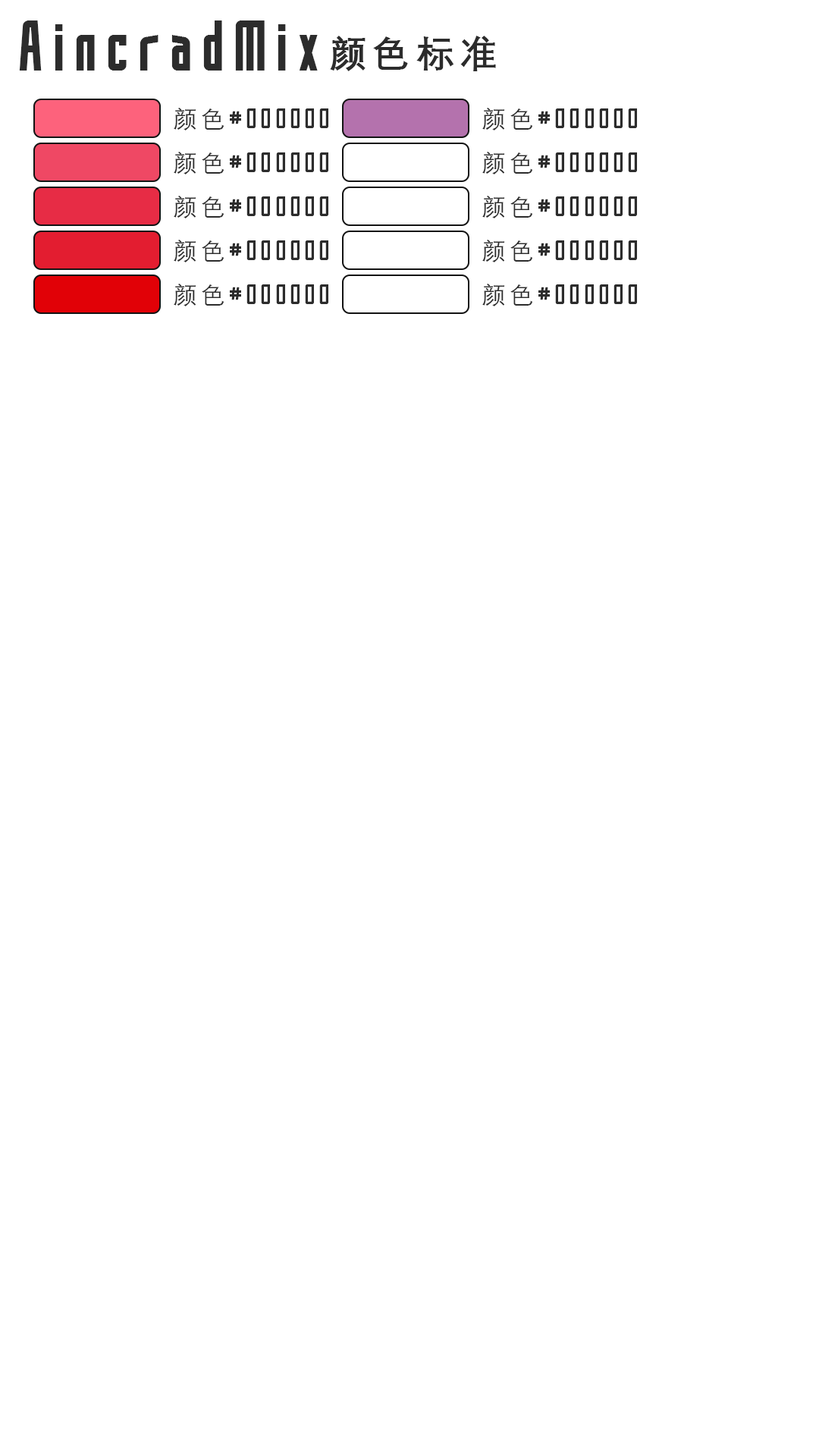
<style>
.page{position:relative;width:819px;height:1456px;background:#ffffff}
.page>*{position:absolute;margin:0}
.t1{font:63.2px "SAOUITT-Bold";letter-spacing:0.15em;color:#2c2c2c}
.t2{font:37.9px "DengXian-Bold";letter-spacing:0.15em;color:#2c2c2c}
.t3{font:24.4px "SAOUI-Regular";letter-spacing:0.15em;color:#2c2c2c}
.t4{font:24.4px "DengXian";letter-spacing:0.15em;color:#2c2c2c}
</style>
<div class="page">
<p class="t1" style="left:19px;top:20px;width:477px;height:51px">AincradMix<span class="t2">颜色标准</span></p>
<p class="t3" style="left:174px;top:108px;width:154px;height:22px"><span class="t4">颜色</span>#000000</p>
<p class="t3" style="left:482px;top:108px;width:155px;height:22px"><span class="t4">颜色</span>#000000</p>
<p class="t3" style="left:174px;top:152px;width:154px;height:22px"><span class="t4">颜色</span>#000000</p>
<p class="t3" style="left:482px;top:152px;width:155px;height:22px"><span class="t4">颜色</span>#000000</p>
<p class="t3" style="left:174px;top:196px;width:154px;height:22px"><span class="t4">颜色</span>#000000</p>
<p class="t3" style="left:482px;top:196px;width:155px;height:22px"><span class="t4">颜色</span>#000000</p>
<p class="t3" style="left:174px;top:240px;width:154px;height:22px"><span class="t4">颜色</span>#000000</p>
<p class="t3" style="left:482px;top:240px;width:155px;height:22px"><span class="t4">颜色</span>#000000</p>
<p class="t3" style="left:174px;top:284px;width:154px;height:22px"><span class="t4">颜色</span>#000000</p>
<p class="t3" style="left:482px;top:284px;width:155px;height:22px"><span class="t4">颜色</span>#000000</p>
</div>
